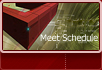
<style>
.page{position:relative;width:102px;height:70px}
.page>*{position:absolute;margin:0}
.t1{font:9px "Tahoma";color:#ffffff}
</style>
<div class="page">
<p class="t1" style="left:40px;top:34px;width:58px;height:7px">Meet Schedule</p>
</div>
